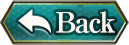
<style>
.page{position:relative;width:129px;height:45px}
.page>*{position:absolute;margin:0}
.t1{font:28px "RyuminPro-ExBold";letter-spacing:-0.08em;color:#fff6f2}
</style>
<div class="page">
<p class="t1" style="left:56px;top:11px;width:59px;height:22px">Back</p>
</div>
